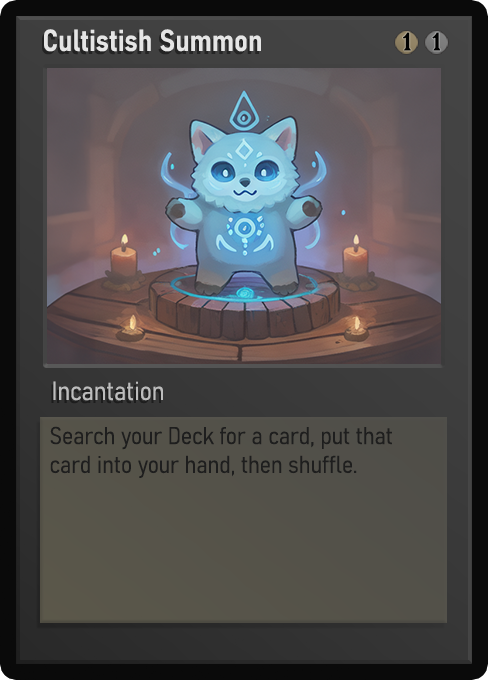
<style>
.page{position:relative;width:488px;height:680px}
.page>*{position:absolute;margin:0}
.t1{font:30px "Bahnschrift-SemiBoldSemiCondensed";color:#f2f2f2;font-weight:bold}
.t2{font:25px "WTRRoycroft";color:#000000;font-weight:bold;scale:1.09 1}
.t3{font:26px "Bahnschrift-LightSemiCondensed";color:#c8c8c8;font-weight:bold}
.t4{font:24px "Bahnschrift-LightSemiCondensed";color:#1e1e1e;font-weight:bold}
</style>
<div class="page">
<p class="t1" style="left:44px;top:29px;width:217px;height:23px;opacity:0.9">Cultistish Summon</p>
<p class="t2" style="left:403px;top:32px;width:8px;height:19px">1</p>
<p class="t2" style="left:432px;top:32px;width:9px;height:19px">1</p>
<p class="t3" style="left:53px;top:381px;width:110px;height:20px;opacity:0.9">Incantation</p>
<p class="t4" style="left:50px;top:426px;width:342px;height:52px">Search your Deck for a card, put that card into your hand, then shuffle.</p>
</div>
